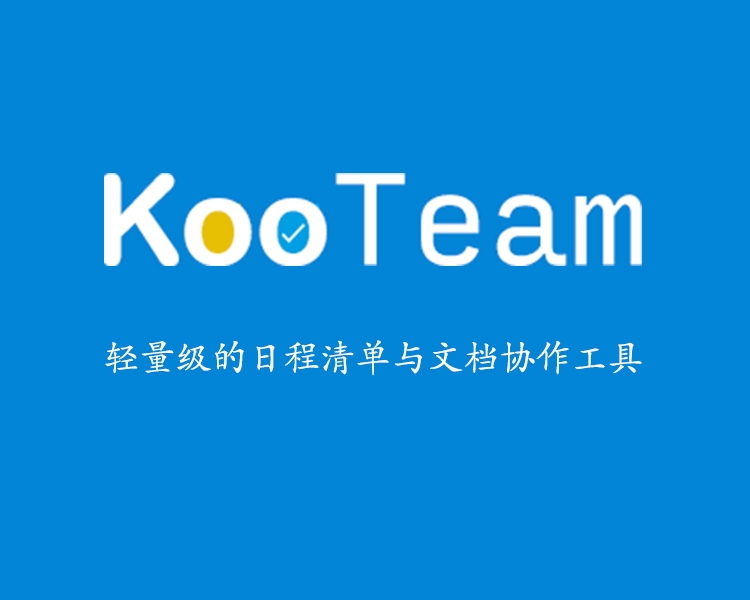
<style>
.page{position:relative;width:750px;height:600px;background:#0285d7}
.page>*{position:absolute;margin:0}
.t1{font:36px "SIL-Kai-Reg-Jian";color:#ffffff}
</style>
<div class="page">
<p class="t1" style="left:105px;top:340px;width:537px;height:36px">轻量级的日程清单与文档协作工具</p>
</div>
